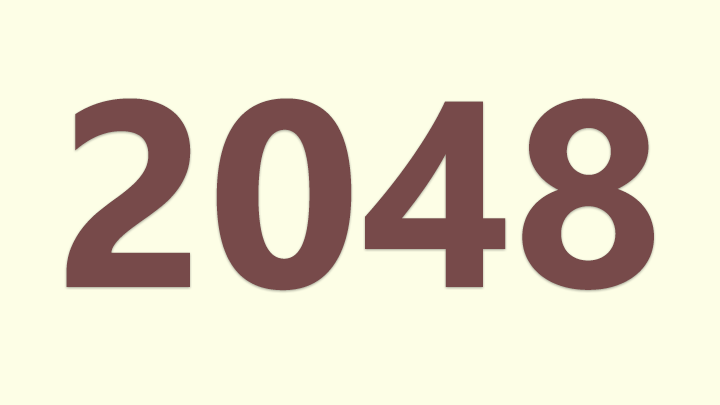
<style>
.page{position:relative;width:720px;height:405px;background:#fdfee6}
.page>*{position:absolute;margin:0}
.t1{font:264.4px "SegoeUI-Bold";color:#774a4a}
</style>
<div class="page">
<p class="t1" style="left:66px;top:98px;width:588px;height:193px">2048</p>
</div>
